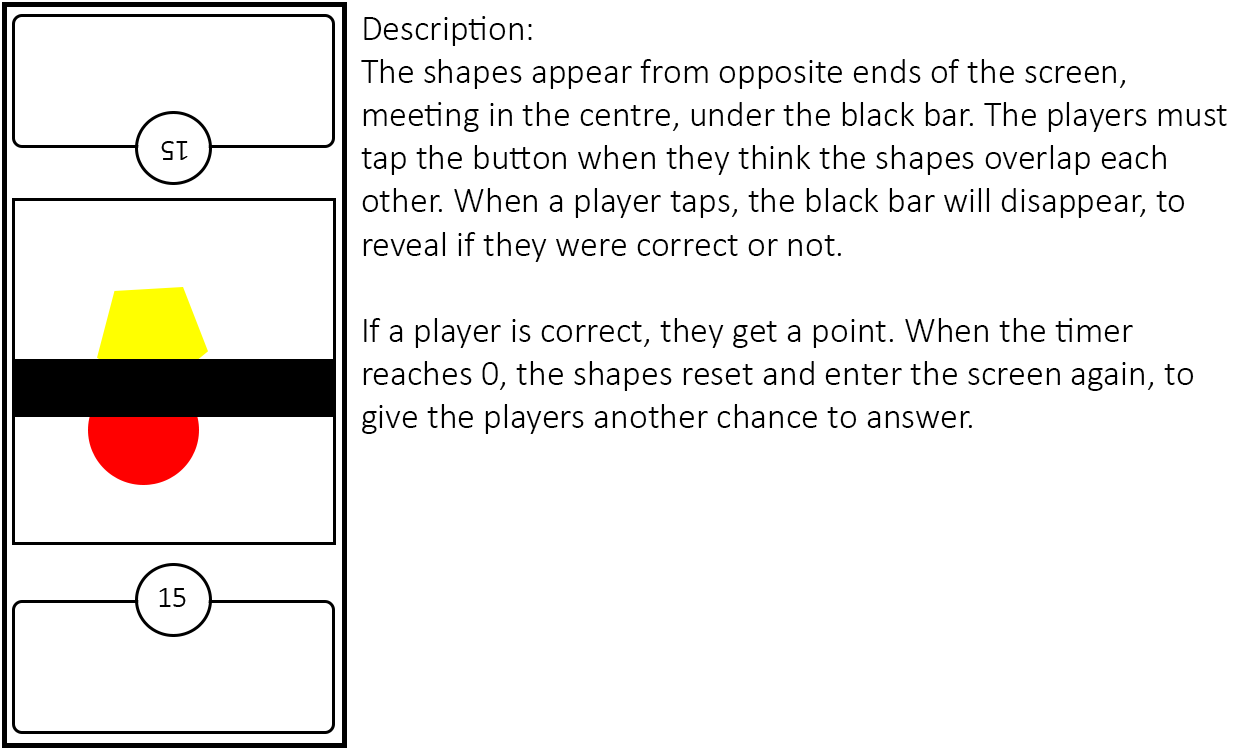
<style>
.page{position:relative;width:1250px;height:750px;background:#ffffff}
.page>*{position:absolute;margin:0}
.t1{font:36px "Calibri-Light";color:#000000}
</style>
<div class="page">
<p class="t1" style="left:361px;top:16px;width:866px;height:418px">Description:<br>The shapes appear from opposite ends of the screen,<br>meeting in the centre, under the black bar. The players must<br>tap the button when they think the shapes overlap each<br>other. When a player taps, the black bar will disappear, to<br>reveal if they were correct or not.<br><br>If a player is correct, they get a point. When the timer <br>reaches 0, the shapes reset and enter the screen again, to <br>give the players another chance to answer.</p>
</div>
